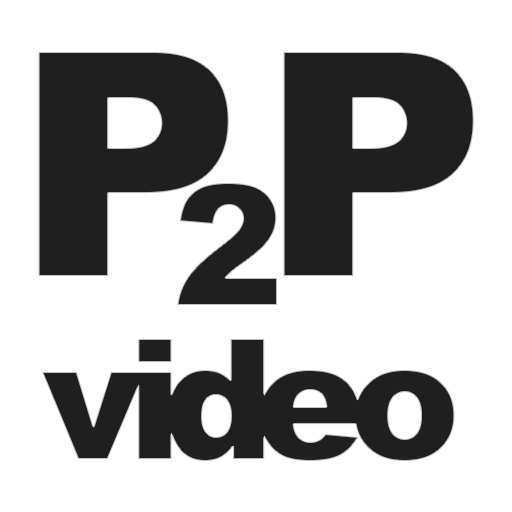
<style>
.page{position:relative;width:512px;height:512px;background:#ffffff}
.page>*{position:absolute;margin:0}
.t1{font:166.7px/220.8px "Arial-Black";letter-spacing:-0.12em;color:#1f1f1f}
.t2{font:312.5px/145.8px "Arial-Black";letter-spacing:-0.22em;color:#1f1f1f}
.t3{font:166.7px/179.2px "Arial-Black";letter-spacing:-0.14em;color:#1f1f1f}
.t4{font:312.5px/145.8px "Arial-Black";letter-spacing:-0.14em;color:#1f1f1f}
.t5{font:166.7px/220.8px "Arial-Black";letter-spacing:-0.1em;color:#1f1f1f}
</style>
<div class="page">
<p class="t1" style="left:38px;top:52px;width:436px;height:409px;text-align:center"><span class="t2">P</span><span class="t3">2</span><span class="t4">P<br></span><span class="t5">v</span>id<span class="t5">eo</span></p>
</div>
